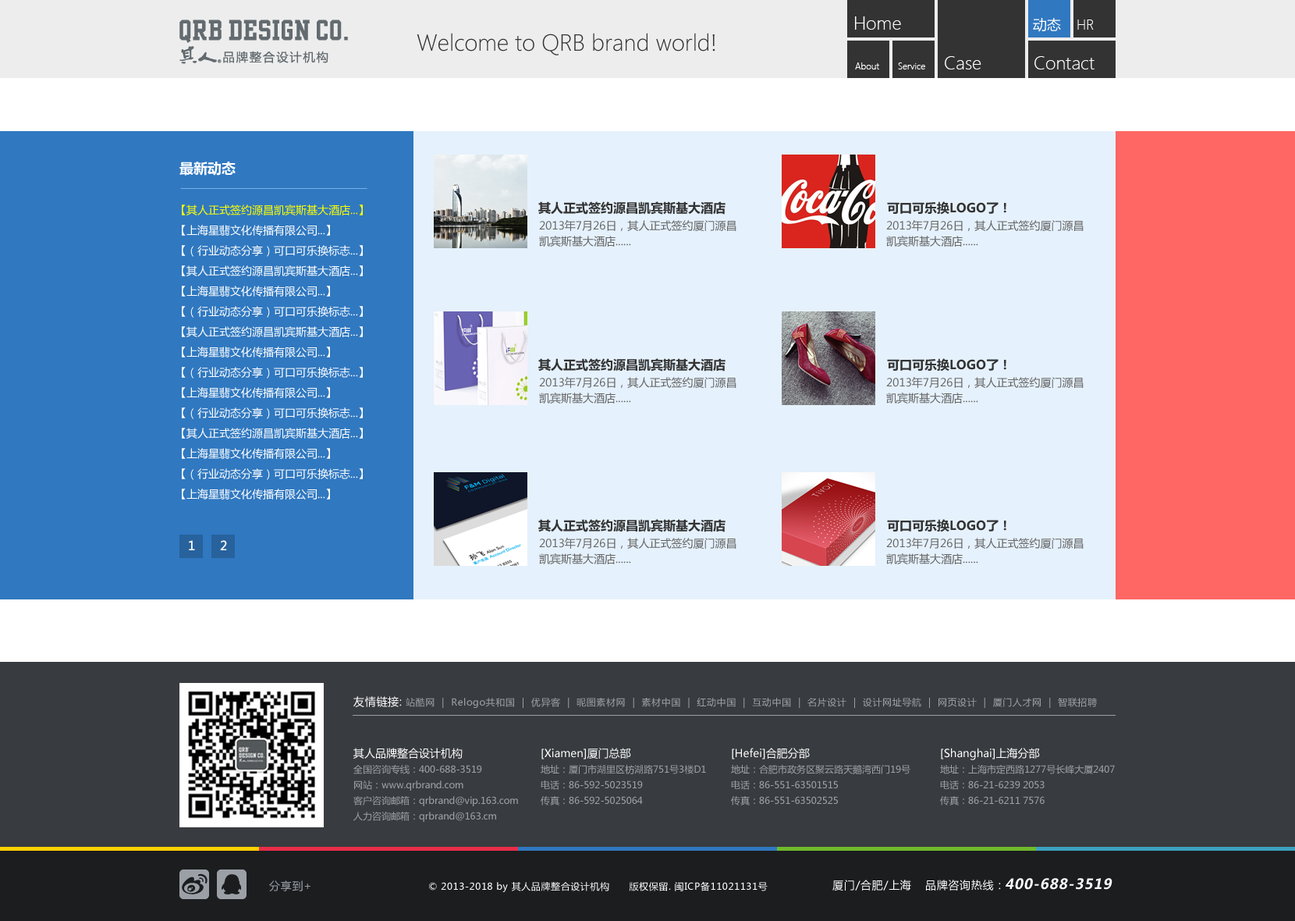
<style>
.page{position:relative;width:1295px;height:921px}
.page>*{position:absolute;margin:0}
.t1{font:18.7px "SegoeUI-Light";color:#ffffff}
.t2{font:14px "MicrosoftYaHei";color:#ffffff}
.t3{font:14px "SegoeUI-Light";color:#ffffff}
.t4{font:23.4px "SegoeUI-Light";color:#333333}
.t5{font:9.4px "SegoeUI-Light";color:#ffffff}
.t6{font:14px "MicrosoftYaHei-Bold";color:#ffffff}
.t7{font:10.9px/20.3px "MicrosoftYaHei";color:#ffffff}
.t8{font:10.9px/20.3px "MicrosoftYaHei";color:#ffff00}
.t9{font:12.5px "MicrosoftYaHei-Bold";color:#333333}
.t10{font:10.9px/15.6px "MicrosoftYaHei";color:#646464}
.t11{font:12.5px "MicrosoftYaHei";color:#ffffff}
.t12{font:9.4px "MicrosoftYaHei";letter-spacing:0.05em;color:#9ba0a7}
.t13{font:10.9px "MicrosoftYaHei";letter-spacing:0.05em;color:#ffffff}
.t14{font:9.4px/15.6px "MicrosoftYaHei";color:#9ba0a7}
.t15{font:10.9px/15.6px "MicrosoftYaHei";color:#ffffff}
.t16{font:10.9px "MicrosoftYaHei";letter-spacing:0.05em;color:#9ba0a7}
.t17{font:9.4px "MicrosoftYaHei";letter-spacing:0.05em;color:#ffffff}
.t18{font:14px "MicrosoftYaHei-Bold";letter-spacing:0.05em;color:#ffffff;font-style:italic}
</style>
<div class="page">
<p class="t1" style="left:855px;top:16px;width:46px;height:14px">Home</p>
<p class="t2" style="left:1033px;top:18px;width:28px;height:14px">动态</p>
<p class="t3" style="left:1077px;top:20px;width:17px;height:10px">HR</p>
<p class="t4" style="left:417px;top:33px;width:298px;height:22px">Welcome to QRB brand world!</p>
<p class="t5" style="left:855px;top:62px;width:24px;height:7px">About</p>
<p class="t5" style="left:898px;top:62px;width:27px;height:7px">Service</p>
<p class="t1" style="left:945px;top:56px;width:37px;height:13px">Case</p>
<p class="t1" style="left:1035px;top:56px;width:60px;height:13px">Contact</p>
<p class="t6" style="left:179px;top:162px;width:57px;height:14px">最新动态</p>
<p class="t7" style="left:182px;top:204px;width:181px;height:295px"><span class="t8">【其人正式签约源昌凯宾斯基大酒店...】<br></span>【上海星翡文化传播有限公司...】<br>【（行业动态分享）可口可乐换标志...】<br>【其人正式签约源昌凯宾斯基大酒店...】<br>【上海星翡文化传播有限公司...】<br>【（行业动态分享）可口可乐换标志...】<br>【其人正式签约源昌凯宾斯基大酒店...】<br>【上海星翡文化传播有限公司...】<br>【（行业动态分享）可口可乐换标志...】<br>【上海星翡文化传播有限公司...】<br>【（行业动态分享）可口可乐换标志...】<br>【其人正式签约源昌凯宾斯基大酒店...】<br>【上海星翡文化传播有限公司...】<br>【（行业动态分享）可口可乐换标志...】<br>【上海星翡文化传播有限公司...】</p>
<p class="t9" style="left:538px;top:201px;width:188px;height:14px">其人正式签约源昌凯宾斯基大酒店</p>
<p class="t9" style="left:887px;top:201px;width:119px;height:14px">可口可乐换LOGO了！</p>
<p class="t10" style="left:539px;top:220px;width:198px;height:27px">2013年7月26日，其人正式签约厦门源昌<br>凯宾斯基大酒店......</p>
<p class="t10" style="left:886px;top:220px;width:198px;height:27px">2013年7月26日，其人正式签约厦门源昌<br>凯宾斯基大酒店......</p>
<p class="t9" style="left:538px;top:358px;width:188px;height:13px">其人正式签约源昌凯宾斯基大酒店</p>
<p class="t9" style="left:887px;top:358px;width:119px;height:13px">可口可乐换LOGO了！</p>
<p class="t10" style="left:539px;top:377px;width:198px;height:26px">2013年7月26日，其人正式签约厦门源昌<br>凯宾斯基大酒店......</p>
<p class="t10" style="left:886px;top:377px;width:198px;height:26px">2013年7月26日，其人正式签约厦门源昌<br>凯宾斯基大酒店......</p>
<p class="t9" style="left:538px;top:519px;width:188px;height:13px">其人正式签约源昌凯宾斯基大酒店</p>
<p class="t9" style="left:887px;top:519px;width:119px;height:13px">可口可乐换LOGO了！</p>
<p class="t11" style="left:189px;top:540px;width:6px;height:10px">1</p>
<p class="t11" style="left:220px;top:540px;width:7px;height:10px">2</p>
<p class="t10" style="left:539px;top:538px;width:198px;height:26px">2013年7月26日，其人正式签约厦门源昌<br>凯宾斯基大酒店......</p>
<p class="t10" style="left:886px;top:538px;width:198px;height:26px">2013年7月26日，其人正式签约厦门源昌<br>凯宾斯基大酒店......</p>
<p class="t12" style="left:353px;top:696px;width:744px;height:12px"><span class="t13">友情链接: </span>站酷网  |  Relogo共和国  |  优异客  |  昵图素材网  |  素材中国  |  红动中国  |  互动中国  |  名片设计  |  设计网址导航  |  网页设计  |  厦门人才网  |  智联招聘</p>
<p class="t14" style="left:353px;top:747px;width:165px;height:75px"><span class="t15">其人品牌整合设计机构<br></span>全国咨询专线：400-688-3519<br>网站：www.qrbrand.com<br>客户咨询邮箱：qrbrand@vip.163.com<br>人力咨询邮箱：qrbrand@163.cm</p>
<p class="t14" style="left:541px;top:747px;width:165px;height:58px"><span class="t15">[Xiamen]厦门总部<br></span>地址：厦门市湖里区枋湖路751号3楼D1<br>电话：86-592-5023519<br>传真：86-592-5025064</p>
<p class="t14" style="left:731px;top:747px;width:180px;height:58px"><span class="t15">[Hefei]合肥分部<br></span>地址：合肥市政务区聚云路天鹅湾西门19号<br>电话：86-551-63501515<br>传真：86-551-63502525</p>
<p class="t14" style="left:940px;top:747px;width:175px;height:58px"><span class="t15">[Shanghai]上海分部<br></span>地址：上海市定西路1277号长峰大厦2407<br>电话：86-21-6239 2053<br>传真：86-21-6211 7576</p>
<p class="t16" style="left:269px;top:880px;width:42px;height:11px">分享到+</p>
<p class="t17" style="left:429px;top:881px;width:339px;height:11px">© 2013-2018 by 其人品牌整合设计机构      版权保留. 闽ICP备11021131号</p>
<p class="t13" style="left:833px;top:879px;width:78px;height:11px">厦门/合肥/上海</p>
<p class="t13" style="left:926px;top:879px;width:75px;height:11px">品牌咨询热线：</p>
<p class="t18" style="left:1006px;top:878px;width:107px;height:11px">400-688-3519</p>
</div>
